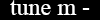
<style>
.page{position:relative;width:100px;height:20px;background:#000000}
.page>*{position:absolute;margin:0}
.t1{font:24px "TimesNewRomanPSMT";color:#ffffff}
</style>
<div class="page">
<p class="t1" style="left:10px;top:0px;width:80px;height:15px">tune m -</p>
</div>
